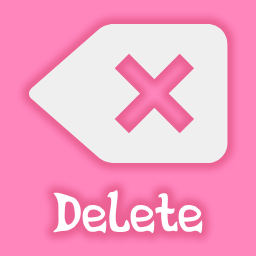
<style>
.page{position:relative;width:256px;height:256px;background:#ff85bd}
.page>*{position:absolute;margin:0}
.t1{font:58.1px "CelestiaReduxAltMedium";color:#ffffff}
</style>
<div class="page">
<p class="t1" style="left:53px;top:190px;width:150px;height:44px">Delete</p>
</div>
